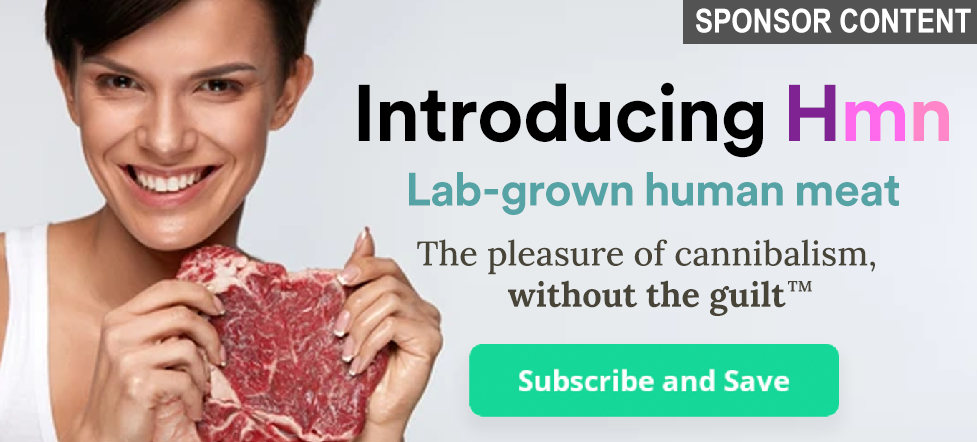
<style>
.page{position:relative;width:977px;height:442px}
.page>*{position:absolute;margin:0}
.t1{font:33.3px "ArialNarrow-Bold";color:#ffffff}
.t2{font:79.2px "CircularSpotifyHead-Bold";color:#000000}
.t3{font:79.2px "CircularSpotifyHead-Bold";color:#802392}
.t4{font:79.2px "CircularSpotifyHead-Bold";color:#ff69eb}
.t5{font:79.2px "CircularSpotifyHead-Bold";color:#ff86c8}
.t6{font:46.3px "CircularSpotifyHead-Bold";color:#56a3a6}
.t7{font:34.3px "Lora-Medium";color:#484538}
.t8{font:34.3px "Lora-Bold";color:#484538}
.t9{font:15px "Lora-Bold";color:#484538}
</style>
<div class="page">
<p class="t1" style="left:696px;top:8px;width:275px;height:25px">SPONSOR CONTENT</p>
<p class="t2" style="left:358px;top:82px;width:591px;height:76px">Introducing <span class="t3">H</span><span class="t4">m</span><span class="t5">n</span></p>
<p class="t6" style="left:409px;top:172px;width:490px;height:43px">Lab-grown human meat</p>
<p class="t7" style="left:417px;top:239px;width:458px;height:77px;text-align:center">The pleasure of cannibalism, <span class="t8">without the guilt</span></p>
<p class="t9" style="left:788px;top:281px;width:24px;height:11px">TM</p>
</div>
